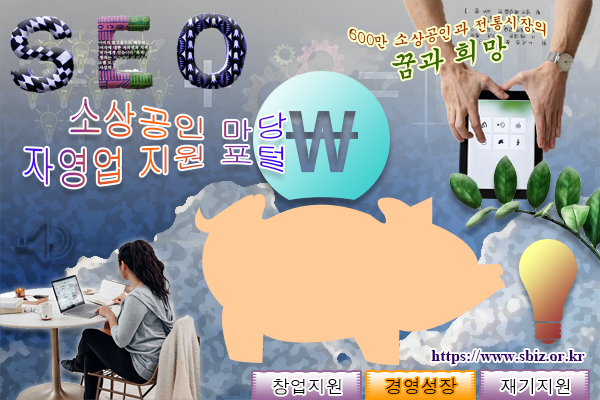
<style>
.page{position:relative;width:600px;height:400px}
.page>*{position:absolute;margin:0}
.t1{font:15px/20px "Gungsuh";color:#993300}
.t2{font:27px/20px "Gungsuh";color:#336600}
.t3{font:16px "TimesNewRomanPS-BoldMT";color:#330066}
.t4{font:18px "Dotum";color:#000000}
</style>
<div class="page">
<p class="t1" style="left:349px;top:15px;width:197px;height:65px;text-align:center">600만 소상공인과 전통시장의<br><span class="t2">꿈과 희망</span></p>
<p class="t3" style="left:431px;top:350px;width:154px;height:14px">https://www.sbiz.or.kr</p>
<p class="t4" style="left:273px;top:378px;width:297px;height:17px">창업지원                          재기지원</p>
<p class="t4" style="left:386px;top:378px;width:71px;height:16px">경영성장</p>
</div>
